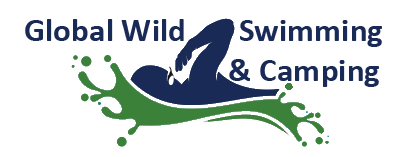
<style>
.page{position:relative;width:400px;height:157px;background:#ffffff}
.page>*{position:absolute;margin:0}
.t1{font:33.3px "Calibri-Bold";color:#192a56}
</style>
<div class="page">
<p class="t1" style="left:25px;top:19px;width:357px;height:68px">Global Wild       Swimming <br>           &amp; Camping</p>
</div>
